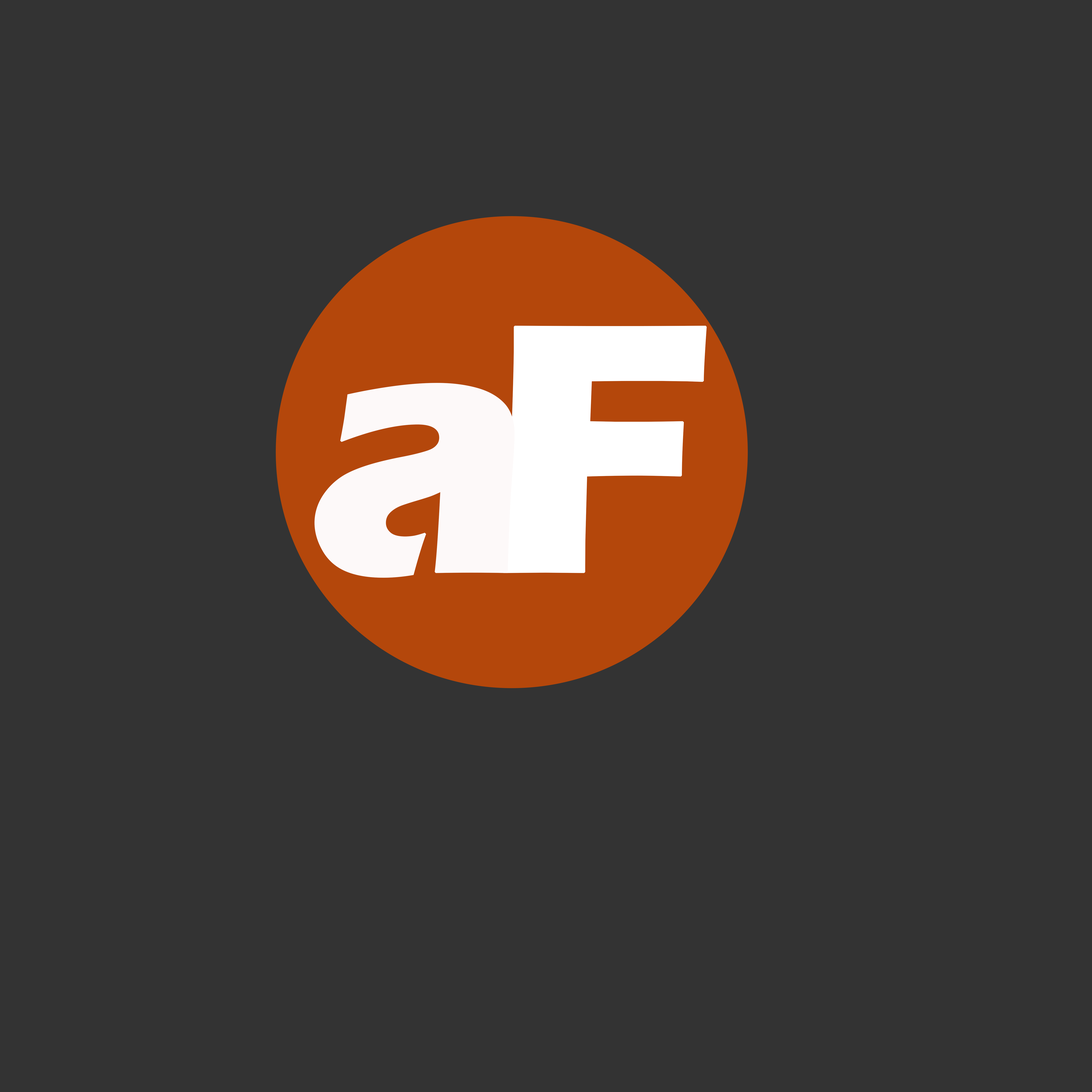
<style>
.page{position:relative;width:1092px;height:1092px;background:#333333}
.page>*{position:absolute;margin:0}
.t1{font:368px "ErasITC-Bold";color:#ffffff;font-weight:bold}
.t2{font:368px "ErasITC-Bold";color:#fdf9f9;font-weight:bold}
</style>
<div class="page">
<p class="t1" style="left:502px;top:326px;width:205px;height:247px">F</p>
<p class="t2" style="left:314px;top:383px;width:201px;height:195px">a</p>
</div>
